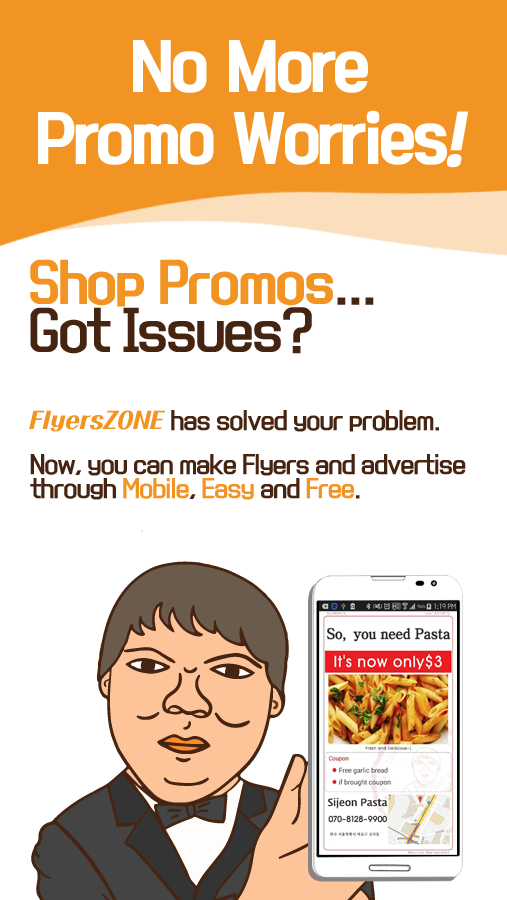
<style>
.page{position:relative;width:507px;height:900px;background:#ffffff}
.page>*{position:absolute;margin:0}
.t1{font:60px/72px "KoreanBLACK-B";letter-spacing:-0.05em;color:#ffffff}
.t2{font:60px/72px "KoreanBLACK-B";letter-spacing:-0.05em;color:#ffffff;font-style:italic}
.t3{font:48px/48px "KoreanYNMYT-M";letter-spacing:-0.05em;color:#462412}
.t4{font:48px/48px "KoreanYNMYT-B";letter-spacing:-0.05em;color:#f29423}
.t5{font:22px/24px "KoreanYNMYT-M";letter-spacing:-0.05em;color:#462412}
.t6{font:22px/30px "KoreanPDSR-R";color:#f29423}
.t7{font:22px/30px "KoreanYNMYT-M";letter-spacing:-0.05em;color:#462412}
.t8{font:22px/14px "KoreanYNMYT-M";letter-spacing:-0.05em;color:#462412}
.t9{font:22px/24px "KoreanYNMYT-M";letter-spacing:-0.05em;color:#f29423}
.t10{font:22px/30px "KoreanYNMYT-M";letter-spacing:-0.05em;color:#f29423}
</style>
<div class="page">
<p class="t1" style="left:38px;top:40px;width:431px;height:128px;text-align:center">No More<br>Promo Worries<span class="t2">!</span></p>
<p class="t3" style="left:30px;top:259px;width:344px;height:95px"><span class="t4">Shop Promos</span>...<br>Got Issues?</p>
<p class="t5" style="left:29px;top:410px;width:437px;height:90px"><span class="t6">FlyersZONE</span><span class="t7"> ha</span><span class="t8">s solved your problem.<br><br>Now, yo</span>u can make Flyers and advertise<br>through <span class="t9">Mobile</span>,<span class="t9"> Eas</span><span class="t10">y </span><span class="t7">and </span><span class="t10">Free</span><span class="t7">.</span></p>
</div>
